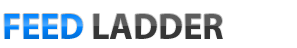
<style>
.page{position:relative;width:297px;height:48px;background:#ffffff}
.page>*{position:absolute;margin:0}
.t1{font:36px "MyriadPro-Bold";text-transform:uppercase}
</style>
<div class="page">
<p class="t1" style="left:4px;top:14px;width:79px;height:25px">FEED</p>
<p class="t1" style="left:93px;top:14px;width:130px;height:25px">LADDER</p>
</div>
